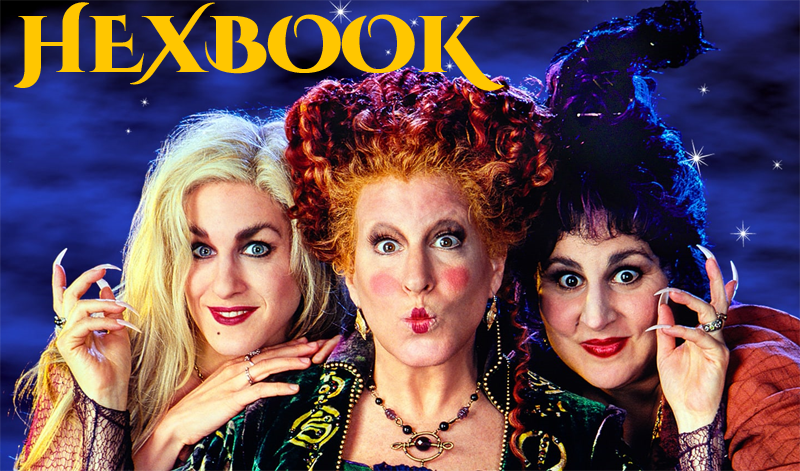
<style>
.page{position:relative;width:800px;height:471px}
.page>*{position:absolute;margin:0}
.t1{font:80px "CinzelDecorative-Black";color:#ffc600}
</style>
<div class="page">
<p class="t1" style="left:14px;top:2px;width:491px;height:89px">HEXBOOK</p>
</div>
